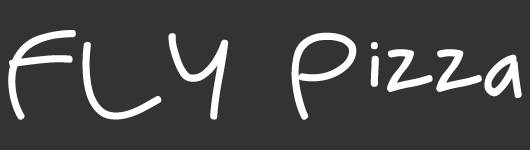
<style>
.page{position:relative;width:530px;height:150px;background:#333333}
.page>*{position:absolute;margin:0}
.t1{font:112.5px "luna-Regular";color:#ffffff}
</style>
<div class="page">
<p class="t1" style="left:8px;top:30px;width:514px;height:90px">FLY Pizza</p>
</div>
